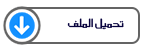
<style>
.page{position:relative;width:150px;height:51px;background:#ffffff}
.page>*{position:absolute;margin:0}
.t1{font:13.4px "SC_KHALID";color:#07023d}
</style>
<div class="page">
<p class="t1" style="left:67px;top:18px;width:57px;height:12px">تحميل الملف</p>
</div>
